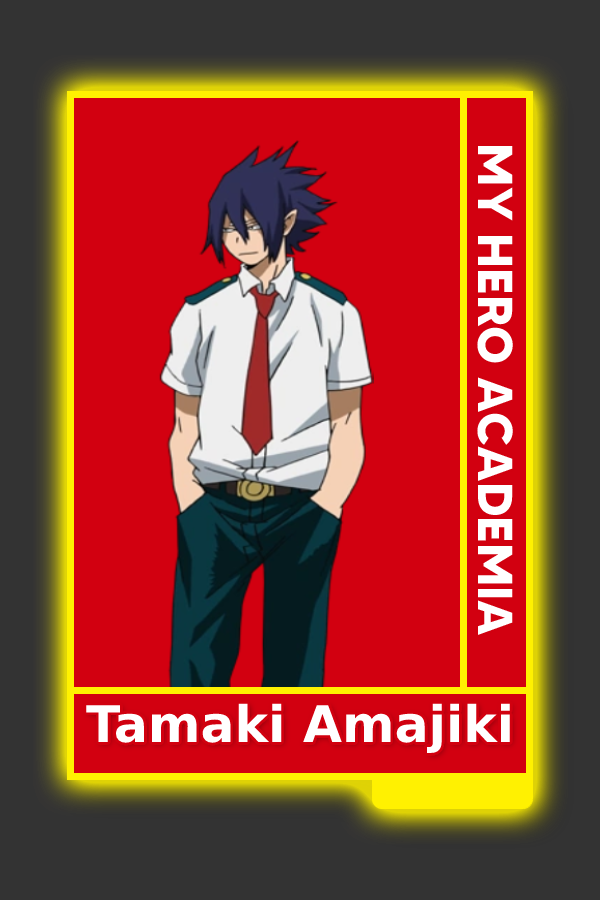
<style>
.page{position:relative;width:600px;height:900px;background:#d20010}
.page>*{position:absolute;margin:0}
.t1{font:48.8px "MADETOMMY-Bold";color:#ffffff}
.t2{font:50.5px "MADETOMMY-Bold";color:#ffffff}
</style>
<div class="page">
<p class="t1" style="left:477px;top:146px;width:36px;height:489px;rotate:90deg">MY HERO ACADEMIA</p>
<p class="t2" style="left:86px;top:703px;width:424px;height:50px">Tamaki Amajiki</p>
</div>
